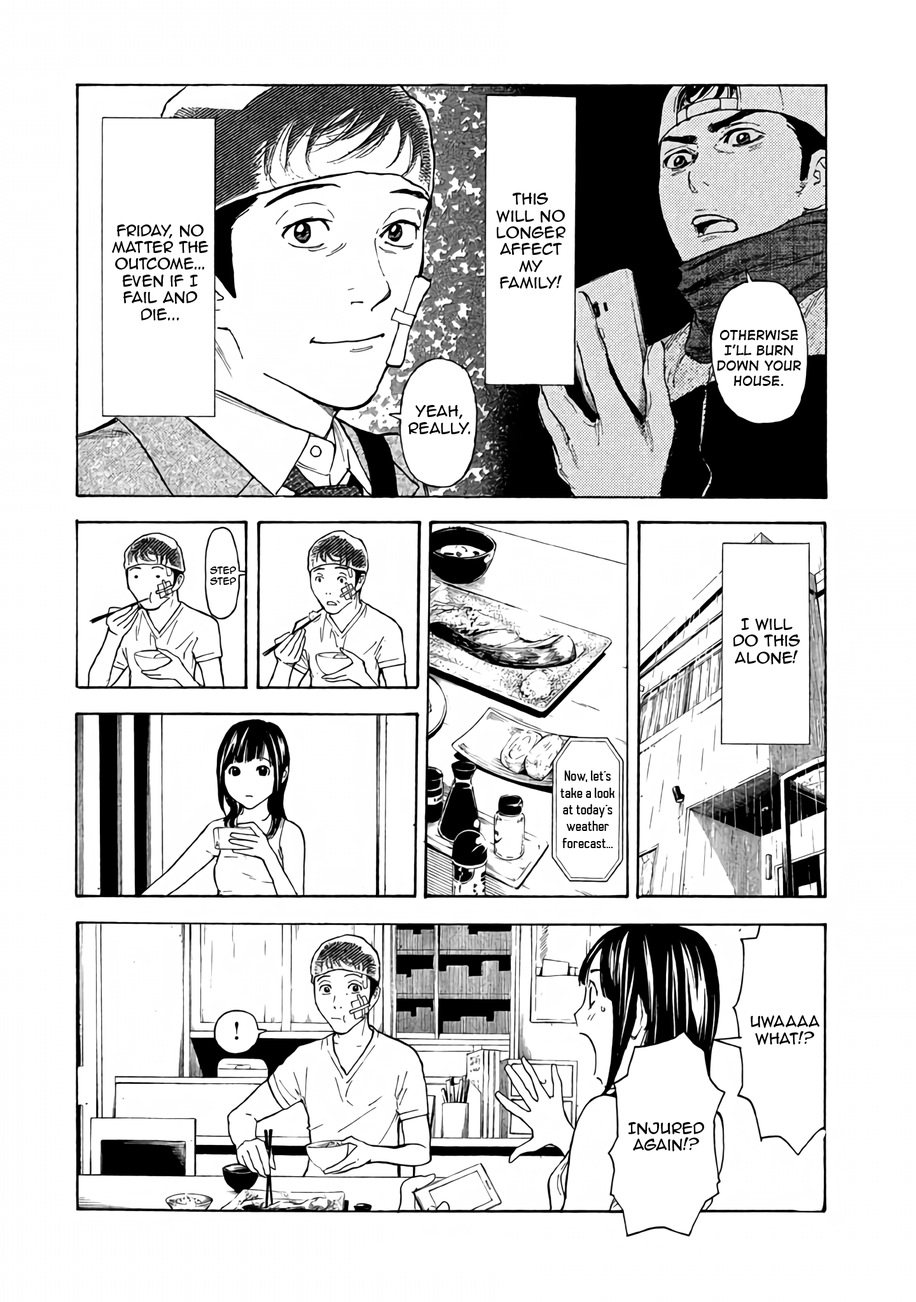
<style>
.page{position:relative;width:916px;height:1302px;background:#ffffff}
.page>*{position:absolute;margin:0}
.t1{font:14px "AnimeAce2.0BB";color:#000000}
.t2{font:12.7px "DigitalStrip";color:#000000}
.t3{font:8.9px "AnimeAce2.0BB";color:#000000}
.t4{font:14px "AutobusBold";color:#000000}
</style>
<div class="page">
<p class="t1" style="left:496px;top:193px;width:69px;height:96px;text-align:center">This will no longer affect my family!</p>
<p class="t1" style="left:112px;top:224px;width:97px;height:96px;text-align:center">Friday, no matter the outcome...<br>Even if I fail and die...</p>
<p class="t2" style="left:717px;top:330px;width:84px;height:56px;text-align:center">otherwise I’ll burn down your house.</p>
<p class="t1" style="left:408px;top:405px;width:63px;height:29px;text-align:center">Yeah, really.</p>
<p class="t3" style="left:210px;top:567px;width:26px;height:18px;text-align:center">step<br>step</p>
<p class="t1" style="left:733px;top:618px;width:67px;height:46px;text-align:center">I will do this alone!</p>
<p class="t4" style="left:560px;top:771px;width:54px;height:77px;text-align:center">Now, let’s take a look at today’s weather forecast...</p>
<p class="t1" style="left:750px;top:1015px;width:70px;height:30px;text-align:center">Uwaaaa What!?</p>
<p class="t1" style="left:628px;top:1122px;width:76px;height:30px;text-align:center">Injured again!?</p>
</div>
